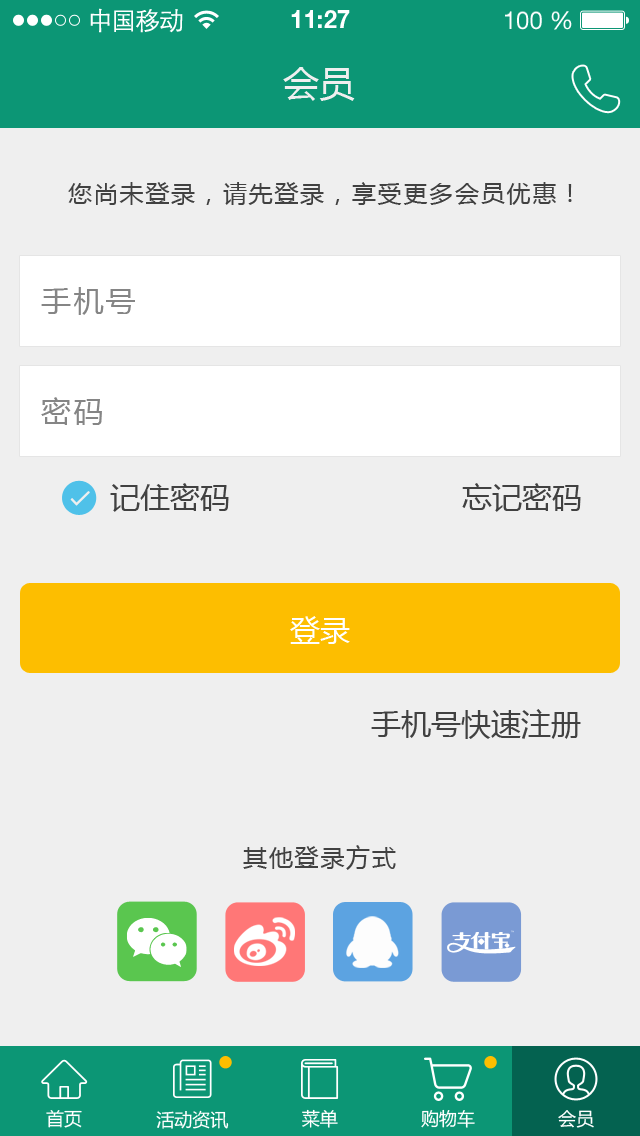
<style>
.page{position:relative;width:640px;height:1136px;background:#efefef}
.page>*{position:absolute;margin:0}
.t1{font:25px "STXihei";letter-spacing:-0.045em;color:#fefefe}
.t2{font:24.6px "HelveticaNeueLTPro-Bd";color:#ffffff}
.t3{font:24.6px "HelveticaNeueLTStd-Roman";color:#ffffff}
.t4{font:36px "MicrosoftYaHei";color:#efefef}
.t5{font:24px "MicrosoftYaHei";letter-spacing:0.075em;color:#414141}
.t6{font:30px "MicrosoftYaHei";letter-spacing:0.075em;color:#858585}
.t7{font:30px "MicrosoftYaHei";color:#414141}
.t8{font:30px "MicrosoftYaHei";color:#ffffff}
.t9{font:18px "MicrosoftYaHei";color:#ffffff}
</style>
<div class="page">
<p class="t1" style="left:90px;top:8px;width:93px;height:25px">中国移动</p>
<p class="t2" style="left:291px;top:10px;width:59px;height:18px">11:27</p>
<p class="t3" style="left:505px;top:11px;width:67px;height:19px">100 %</p>
<p class="t4" style="left:283px;top:67px;width:72px;height:34px">会员</p>
<p class="t5" style="left:68px;top:182px;width:504px;height:23px">您尚未登录，请先登录，享受更多会员优惠！</p>
<p class="t6" style="left:41px;top:287px;width:94px;height:28px">手机号</p>
<p class="t6" style="left:41px;top:397px;width:61px;height:28px">密码</p>
<p class="t7" style="left:110px;top:483px;width:119px;height:29px">记住密码</p>
<p class="t7" style="left:462px;top:483px;width:119px;height:29px">忘记密码</p>
<p class="t8" style="left:290px;top:616px;width:60px;height:28px">登录</p>
<p class="t7" style="left:371px;top:709px;width:210px;height:30px">手机号快速注册</p>
<p class="t5" style="left:243px;top:845px;width:153px;height:25px">其他登录方式</p>
<p class="t9" style="left:46px;top:1110px;width:36px;height:18px">首页</p>
<p class="t9" style="left:156px;top:1110px;width:73px;height:19px">活动资讯</p>
<p class="t9" style="left:302px;top:1109px;width:36px;height:19px">菜单</p>
<p class="t9" style="left:421px;top:1109px;width:54px;height:19px">购物车</p>
<p class="t9" style="left:558px;top:1110px;width:36px;height:18px">会员</p>
</div>
